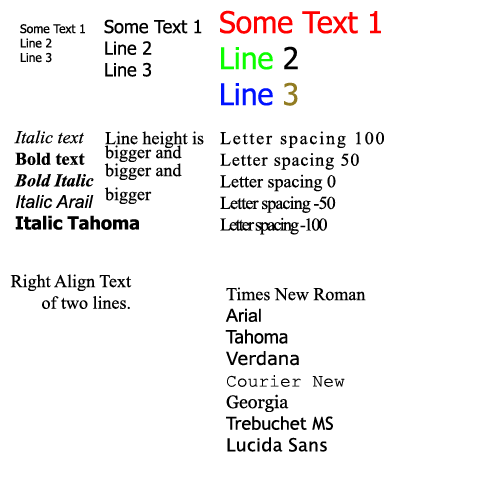
<style>
.page{position:relative;width:500px;height:500px;background:#ffffff}
.page>*{position:absolute;margin:0}
.t1{font:30px "Tahoma";color:#ff0000}
.t2{font:30px "Tahoma";color:#0cfe00}
.t3{font:30px "Tahoma";color:#000000}
.t4{font:30px "Tahoma";color:#0012ff}
.t5{font:30px "Tahoma";color:#927c22}
.t6{font:12px "Tahoma";color:#000000}
.t7{font:18px "Tahoma";color:#000000}
.t8{font:18px "Tahoma-Bold";color:#000000}
.t9{font:18px "TimesNewRomanPS-ItalicMT";color:#000000}
.t10{font:18px "TimesNewRomanPS-BoldMT";color:#000000}
.t11{font:18px "TimesNewRomanPS-BoldItalicMT";color:#000000}
.t12{font:18px "Arial-ItalicMT";color:#000000}
.t13{font:18px/10px "TimesNewRomanPSMT";color:#000000}
.t14{font:18px/14px "TimesNewRomanPSMT";color:#000000}
.t15{font:18px/18px "TimesNewRomanPSMT";color:#000000}
.t16{font:18px/24px "TimesNewRomanPSMT";color:#000000}
.t17{font:18px "TimesNewRomanPSMT";letter-spacing:-0.1em;color:#000000}
.t18{font:18px "TimesNewRomanPSMT";letter-spacing:0.1em;color:#000000}
.t19{font:18px "TimesNewRomanPSMT";letter-spacing:0.05em;color:#000000}
.t20{font:18px "TimesNewRomanPSMT";color:#000000}
.t21{font:18px "TimesNewRomanPSMT";letter-spacing:-0.05em;color:#000000}
.t22{font:18px "ArialMT";color:#000000}
.t23{font:18px "Verdana";color:#000000}
.t24{font:18px "CourierNewPSMT";color:#000000}
.t25{font:18px "Georgia";color:#000000}
.t26{font:18px "TrebuchetMS";color:#000000}
.t27{font:18px "LucidaSans";color:#000000}
</style>
<div class="page">
<p class="t1" style="left:220px;top:10px;width:161px;height:96px">Some Text 1<br><span class="t2">Line</span><span class="t3"> 2<br></span><span class="t4">Line </span><span class="t5">3</span></p>
<p class="t6" style="left:20px;top:24px;width:65px;height:39px">Some Text 1<br>Line 2<br>Line 3</p>
<p class="t7" style="left:104px;top:19px;width:98px;height:58px">Some Text 1<br>Line 2<br>Line 3</p>
<p class="t8" style="left:14px;top:130px;width:125px;height:100px"><span class="t9">Italic text<br></span><span class="t10">Bold text<br></span><span class="t11">Bold Italic<br></span><span class="t12">Italic Arail<br></span>Italic Tahoma</p>
<p class="t13" style="left:104px;top:131px;width:100px;height:73px">Line height is<br><span class="t14">bigger and<br></span><span class="t15">bigger and <br></span><span class="t16">bigger</span></p>
<p class="t17" style="left:220px;top:131px;width:164px;height:104px"><span class="t18">Letter spacing 100<br></span><span class="t19">Letter spacing 50<br></span><span class="t20">Letter spacing 0<br></span><span class="t21">Letter spacing -50<br></span>Letter spacing -100</p>
<p class="t20" style="left:10px;top:274px;width:122px;height:35px;text-align:right">Right Align Text<br>of two lines.</p>
<p class="t20" style="left:225px;top:287px;width:141px;height:165px">Times New Roman<br><span class="t22">Arial<br></span><span class="t7">Tahoma<br></span><span class="t23">Verdana<br></span><span class="t24">Courier New<br></span><span class="t25">Georgia<br></span><span class="t26">Trebuchet MS<br></span><span class="t27">Lucida Sans</span></p>
</div>
